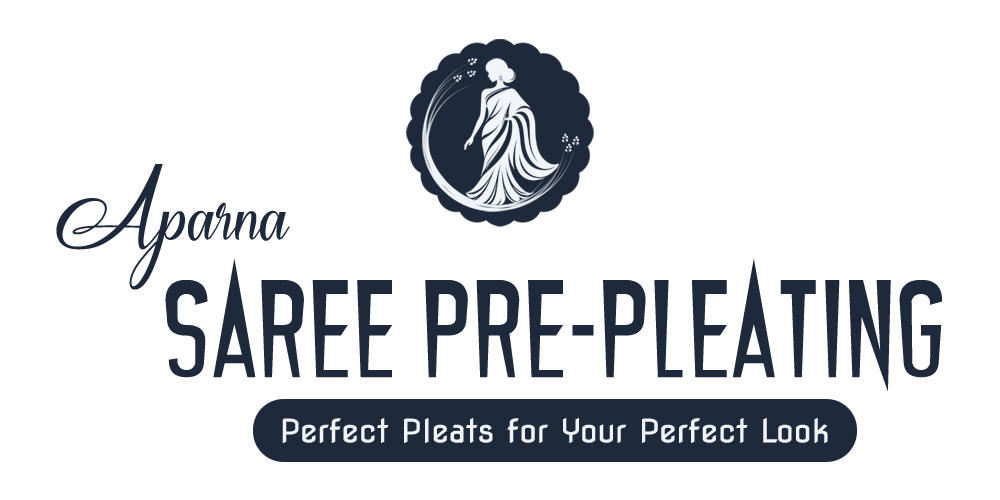
<style>
.page{position:relative;width:1000px;height:500px;background:#ffffff}
.page>*{position:absolute;margin:0}
.t1{font:108px "MySunshineRegular";color:#1e293b}
.t2{font:142px "Vampires";letter-spacing:0.02em;color:#1e293b}
.t3{font:32px "NovaFlat";color:#f1f5f9}
</style>
<div class="page">
<p class="t1" style="left:56px;top:164px;width:234px;height:126px">Aparna</p>
<p class="t2" style="left:165px;top:259px;width:777px;height:132px">Saree Pre-Pleating</p>
<p class="t3" style="left:282px;top:418px;width:546px;height:25px">Perfect Pleats for Your Perfect Look</p>
</div>
